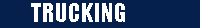
<style>
.page{position:relative;width:200px;height:28px;background:#05204d}
.page>*{position:absolute;margin:0}
.t1{font:24px "Impact";color:#ffffff}
</style>
<div class="page">
<p class="t1" style="left:31px;top:3px;width:94px;height:19px">TRUCKING</p>
</div>
